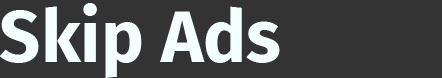
<style>
.page{position:relative;width:442px;height:78px;background:#333333}
.page>*{position:absolute;margin:0}
.t1{font:72px "FiraSans-Bold";color:#f4ffff}
</style>
<div class="page">
<p class="t1" style="left:0px;top:3px;width:280px;height:75px">Skip Ads</p>
</div>
